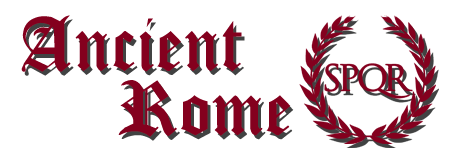
<style>
.page{position:relative;width:450px;height:150px;background:#ffffff}
.page>*{position:absolute;margin:0}
.t1{font:80px "CloisterBlack-Light";color:#84001e}
</style>
<div class="page">
<p class="t1" style="left:21px;top:15px;width:221px;height:57px">Ancient</p>
<p class="t1" style="left:118px;top:80px;width:173px;height:57px">Rome</p>
</div>
